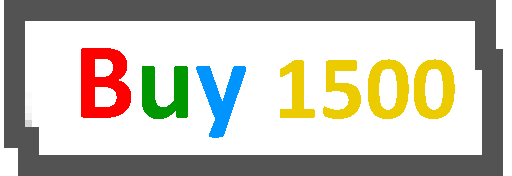
<style>
.page{position:relative;width:512px;height:176px;background:#ffffff}
.page>*{position:absolute;margin:0}
.t1{font:90.7px "Calibri-Bold";color:#eccc00}
.t2{font:110.7px "Calibri-Bold";color:#ff0000}
.t3{font:110.7px "Calibri-Bold";color:#009700}
.t4{font:110.7px "Calibri-Bold";color:#0094ff}
</style>
<div class="page">
<p class="t1" style="left:81px;top:48px;width:374px;height:90px"><span class="t2">B</span><span class="t3">u</span><span class="t4">y </span>1500</p>
</div>
